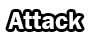
<style>
.page{position:relative;width:90px;height:40px;background:#ffffff}
.page>*{position:absolute;margin:0}
.t1{font:25px "FranklinGothic-Demi";color:#ffffff}
</style>
<div class="page">
<p class="t1" style="left:8px;top:12px;width:74px;height:17px">Attack</p>
</div>
